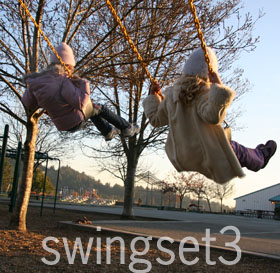
<style>
.page{position:relative;width:280px;height:273px}
.page>*{position:absolute;margin:0}
.t1{font:48px "NewsGothicStd";color:#aeaaa8}
</style>
<div class="page">
<p class="t1" style="left:41px;top:225px;width:201px;height:49px">swingset3</p>
</div>
